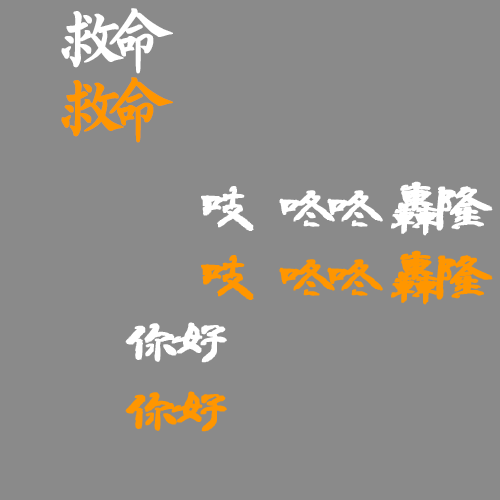
<style>
.page{position:relative;width:500px;height:500px;background:#8a8a8a}
.page>*{position:absolute;margin:0}
.t1{font:66.7px "FZSXSLKFW--GB1-0";letter-spacing:-0.3em;color:#ffffff;font-weight:bold}
.t2{font:66.7px "FZSXSLKJW--GB1-0";letter-spacing:-0.3em;color:#ff9600;font-weight:bold}
.t3{font:66.7px "FZZJ-XSLSFW";letter-spacing:-0.3em;color:#ffffff;font-weight:bold}
.t4{font:66.7px "FZZJ-XSLSFW";letter-spacing:-0.05em;color:#ffffff;font-weight:bold}
.t5{font:66.7px "FZZJ-XSLSFW";letter-spacing:-0.05em;color:#ff9600;font-weight:bold}
.t6{font:66.7px "FZZJ-XSLSFW";letter-spacing:-0.3em;color:#ff9600;font-weight:bold}
</style>
<div class="page">
<p class="t1" style="left:61px;top:8px;width:112px;height:66px">救命</p>
<p class="t2" style="left:61px;top:77px;width:112px;height:66px">救命</p>
<p class="t3" style="left:391px;top:181px;width:102px;height:55px">轰隆</p>
<p class="t4" style="left:201px;top:186px;width:53px;height:45px">吱</p>
<p class="t3" style="left:279px;top:190px;width:104px;height:37px">咚咚</p>
<p class="t5" style="left:201px;top:255px;width:53px;height:45px">吱</p>
<p class="t6" style="left:391px;top:250px;width:102px;height:55px">轰隆</p>
<p class="t6" style="left:279px;top:259px;width:104px;height:37px">咚咚</p>
<p class="t3" style="left:125px;top:322px;width:102px;height:41px">你好</p>
<p class="t6" style="left:125px;top:391px;width:102px;height:41px">你好</p>
</div>
